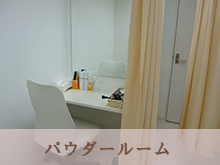
<style>
.page{position:relative;width:220px;height:165px}
.page>*{position:absolute;margin:0}
.t1{font:17px "HGSSoeiPresenceEB";letter-spacing:0.075em;color:#73523f}
</style>
<div class="page">
<p class="t1" style="left:44px;top:141px;width:126px;height:15px">パウダールーム</p>
</div>
